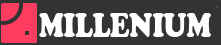
<style>
.page{position:relative;width:221px;height:45px;background:#333333}
.page>*{position:absolute;margin:0}
.t1{font:36px "CooperBlack";color:#fffefe;scale:0.77 1}
</style>
<div class="page">
<p class="t1" style="left:39px;top:13px;width:172px;height:24px">MILLENIUM</p>
</div>
